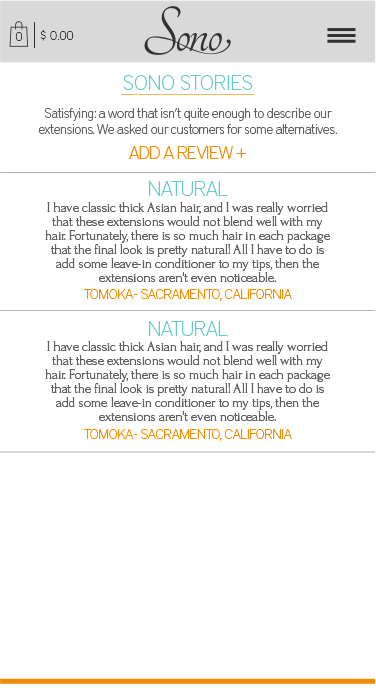
<style>
.page{position:relative;width:376px;height:691px;background:#ffffff}
.page>*{position:absolute;margin:0}
.t1{font:12.4px "DistrictPro-Thin";color:#323232}
.t2{font:21px "DistrictPro-Thin";color:#65cbc9}
.t3{font:14px/16px "DistrictPro-Thin";letter-spacing:-0.031em;color:#5f6062}
.t4{font:18px "DistrictPro-Thin";letter-spacing:-0.031em;color:#f38b00}
.t5{font:21px "DistrictPro-Thin";letter-spacing:-0.031em;color:#65cbc9}
.t6{font:14px/14px "Forum";letter-spacing:-0.031em;color:#5f6062}
.t7{font:14px "DistrictPro-Thin";letter-spacing:-0.031em;color:#f38b00}
</style>
<div class="page">
<p class="t1" style="left:40px;top:29px;width:34px;height:12px">$ 0.00</p>
<p class="t1" style="left:15px;top:32px;width:8px;height:9px">0</p>
<p class="t2" style="left:123px;top:75px;width:129px;height:15px">SONO STORIES</p>
<p class="t3" style="left:38px;top:108px;width:300px;height:26px;text-align:center">Satisfying: a word that isn’t quite enough to describe our extensions. We asked our customers for some alternatives.</p>
<p class="t4" style="left:129px;top:146px;width:117px;height:13px">ADD A REVIEW +</p>
<p class="t5" style="left:149px;top:181px;width:79px;height:15px">NATURAL</p>
<p class="t6" style="left:45px;top:202px;width:285px;height:81px;text-align:center">I have classic thick Asian hair, and I was really worried that these extensions would not blend well with my hair. Fortunately, there is so much hair in each package that the final look is pretty natural! All I have to do is add some leave-in conditioner to my tips, then the extensions aren't even noticeable.</p>
<p class="t7" style="left:84px;top:289px;width:208px;height:12px">TOMOKA - SACRAMENTO, CALIFORNIA</p>
<p class="t5" style="left:149px;top:321px;width:79px;height:15px">NATURAL</p>
<p class="t6" style="left:45px;top:341px;width:285px;height:81px;text-align:center">I have classic thick Asian hair, and I was really worried that these extensions would not blend well with my hair. Fortunately, there is so much hair in each package that the final look is pretty natural! All I have to do is add some leave-in conditioner to my tips, then the extensions aren't even noticeable.</p>
<p class="t7" style="left:84px;top:429px;width:208px;height:12px">TOMOKA - SACRAMENTO, CALIFORNIA</p>
</div>
